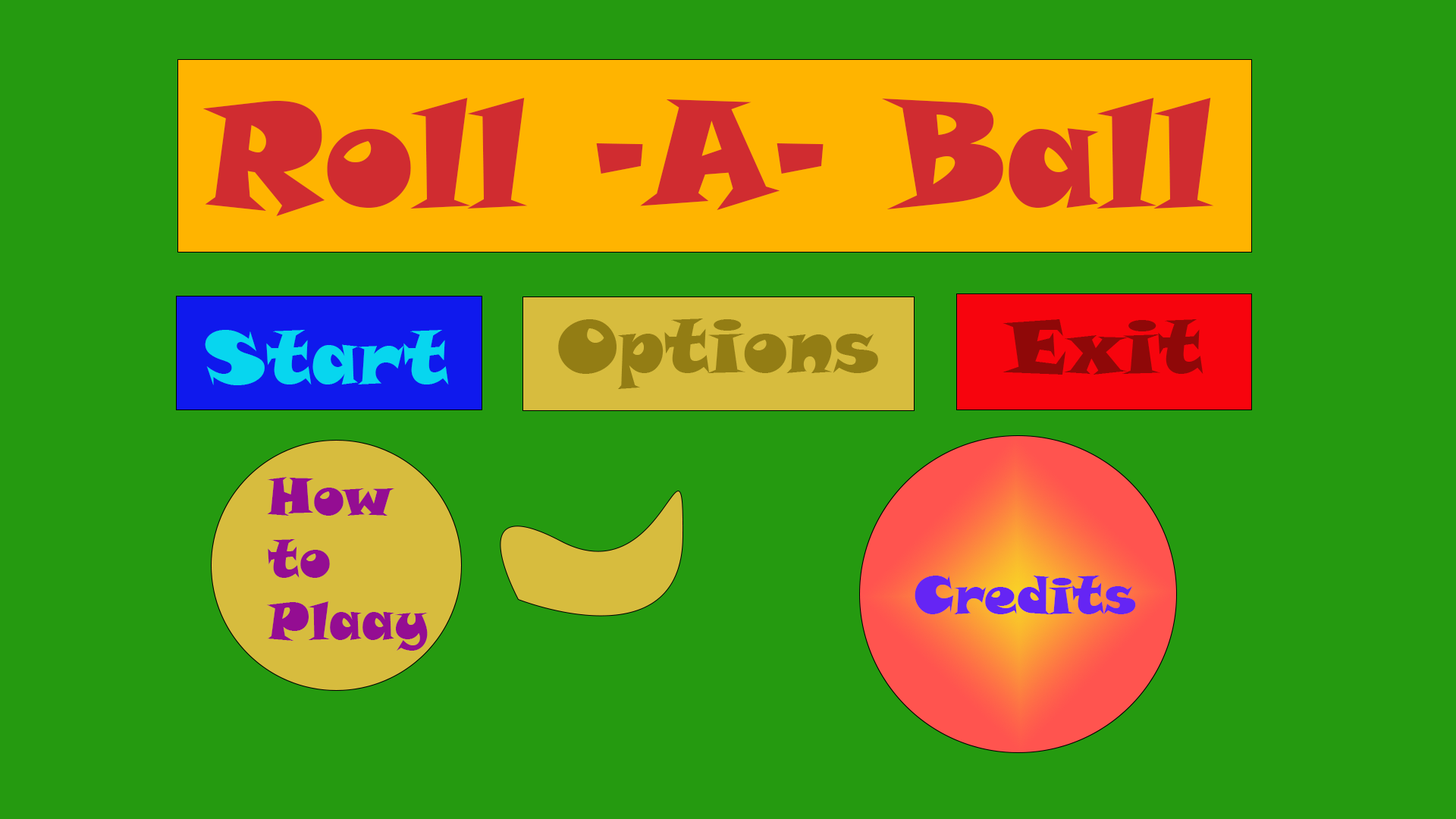
<style>
.page{position:relative;width:1456px;height:819px;background:#259a10}
.page>*{position:absolute;margin:0}
.t1{font:147.5px "SnapITC-Regular";color:#d02c30}
.t2{font:73.7px "SnapITC-Regular";color:#07d6ef}
.t3{font:73.7px "SnapITC-Regular";color:#937d14}
.t4{font:73.7px "SnapITC-Regular";color:#8f0808}
.t5{font:51.6px "SnapITC-Regular";color:#940d92}
.t6{font:51.6px "SnapITC-Regular";color:#6525f4}
</style>
<div class="page">
<p class="t1" style="left:202px;top:98px;width:1012px;height:118px">Roll -A- Ball</p>
<p class="t2" style="left:205px;top:330px;width:244px;height:55px">Start</p>
<p class="t3" style="left:558px;top:318px;width:320px;height:71px">Options</p>
<p class="t4" style="left:1003px;top:319px;width:200px;height:56px">Exit</p>
<p class="t5" style="left:267px;top:477px;width:161px;height:174px">How to Plaay</p>
<p class="t6" style="left:915px;top:576px;width:221px;height:38px">Credits</p>
</div>
